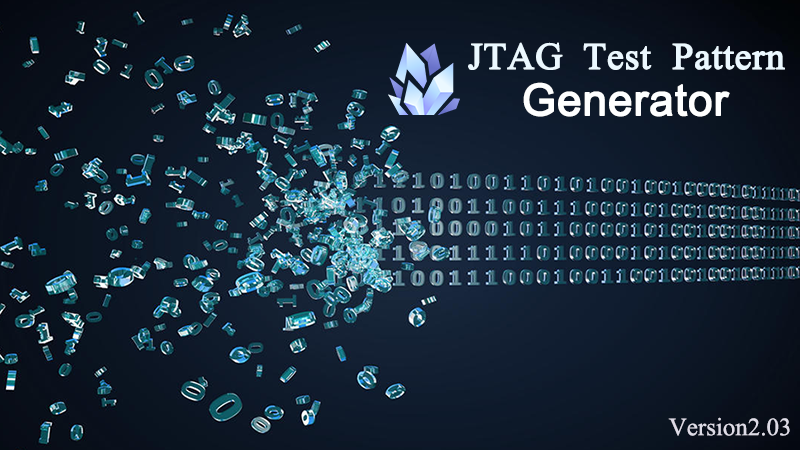
<style>
.page{position:relative;width:800px;height:450px}
.page>*{position:absolute;margin:0}
.t1{font:37.4px "TimesNewRomanPSMT";color:#ebf8ff;font-weight:bold}
.t2{font:43.7px "ArialMT";color:#feffff;font-weight:bold}
.t3{font:25px "TimesNewRomanPSMT";color:#dedce7}
</style>
<div class="page">
<p class="t1" style="left:468px;top:42px;width:317px;height:28px">JTAG Test  Pattern</p>
<p class="t2" style="left:523px;top:82px;width:207px;height:35px">Generator</p>
<p class="t3" style="left:668px;top:417px;width:122px;height:19px">Version2.03</p>
</div>
